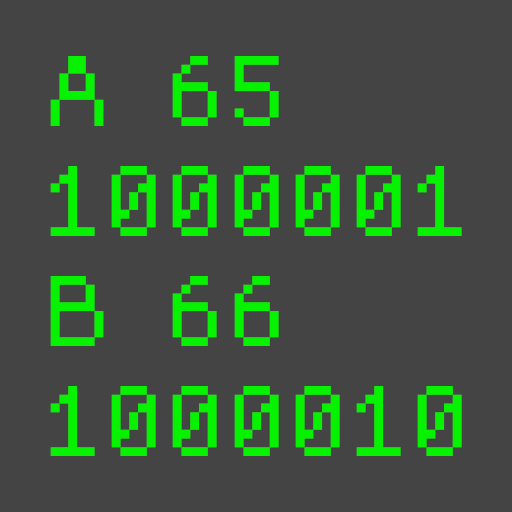
<style>
.page{position:relative;width:512px;height:512px;background:#444444}
.page>*{position:absolute;margin:0}
.t1{font:140px/110px "basis33";color:#06f200}
</style>
<div class="page">
<p class="t1" style="left:50px;top:56px;width:412px;height:400px">A 65<br>1000001<br>B 66<br>1000010</p>
</div>
